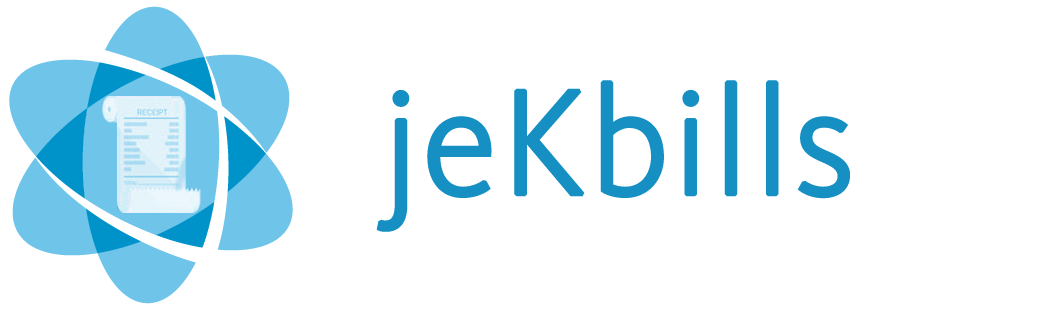
<style>
.page{position:relative;width:1064px;height:312px;background:#ffffff}
.page>*{position:absolute;margin:0}
.t1{font:155px "KievitOT-Light";color:#1690c3;font-weight:bold}
</style>
<div class="page">
<p class="t1" style="left:376px;top:80px;width:474px;height:152px">jeKbills</p>
</div>
